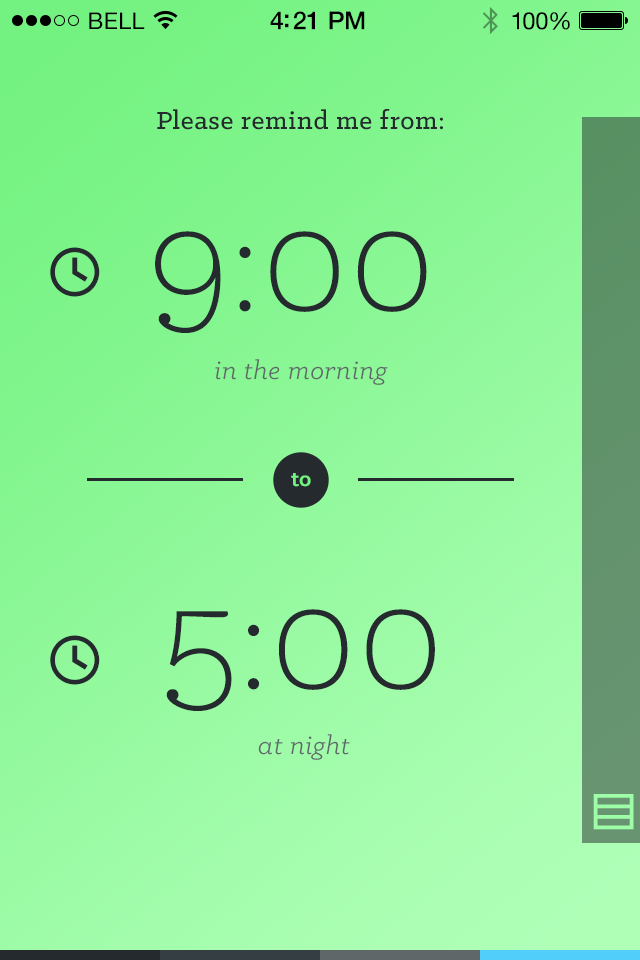
<style>
.page{position:relative;width:640px;height:960px}
.page>*{position:absolute;margin:0}
.t1{font:23px "HelveticaNeue";letter-spacing:0.02em;color:#000000}
.t2{font:25px "HelveticaNeue-Medium";letter-spacing:-0.02em;color:#000000}
.t3{font:24px "HelveticaNeue";letter-spacing:-0.02em;color:#010101}
.t4{font:28px "KlinicSlab-Medium";letter-spacing:0.025em;color:#252a2f}
.t5{font:164.5px "KlinicSlab-Light";color:#252a2f}
.t6{font:64px "SSGizmo";color:#252a2f}
.t7{font:28px "KlinicSlab-BookItalic";letter-spacing:0.025em;color:#606769}
.t8{font:24px "KlinicSlab-Bold";color:#74f281}
.t9{font:48px "SSGizmo";color:#9dfea7}
</style>
<div class="page">
<p class="t1" style="left:89px;top:12px;width:56px;height:17px">BELL</p>
<p class="t2" style="left:270px;top:11px;width:95px;height:19px">4:21 PM</p>
<p class="t3" style="left:512px;top:12px;width:58px;height:18px">100%</p>
<p class="t4" style="left:157px;top:109px;width:286px;height:21px">Please remind me from:</p>
<p class="t5" style="left:155px;top:231px;width:272px;height:102px">9:00</p>
<p class="t6" style="left:50px;top:247px;width:50px;height:50px">clock</p>
<p class="t7" style="left:215px;top:359px;width:173px;height:26px">in the morning</p>
<p class="t8" style="left:291px;top:473px;width:20px;height:14px">to</p>
<p class="t5" style="left:166px;top:609px;width:269px;height:102px">5:00</p>
<p class="t6" style="left:50px;top:635px;width:50px;height:50px">clock</p>
<p class="t7" style="left:258px;top:734px;width:92px;height:26px">at night</p>
<p class="t9" style="left:593px;top:794px;width:41px;height:36px">rows</p>
</div>
